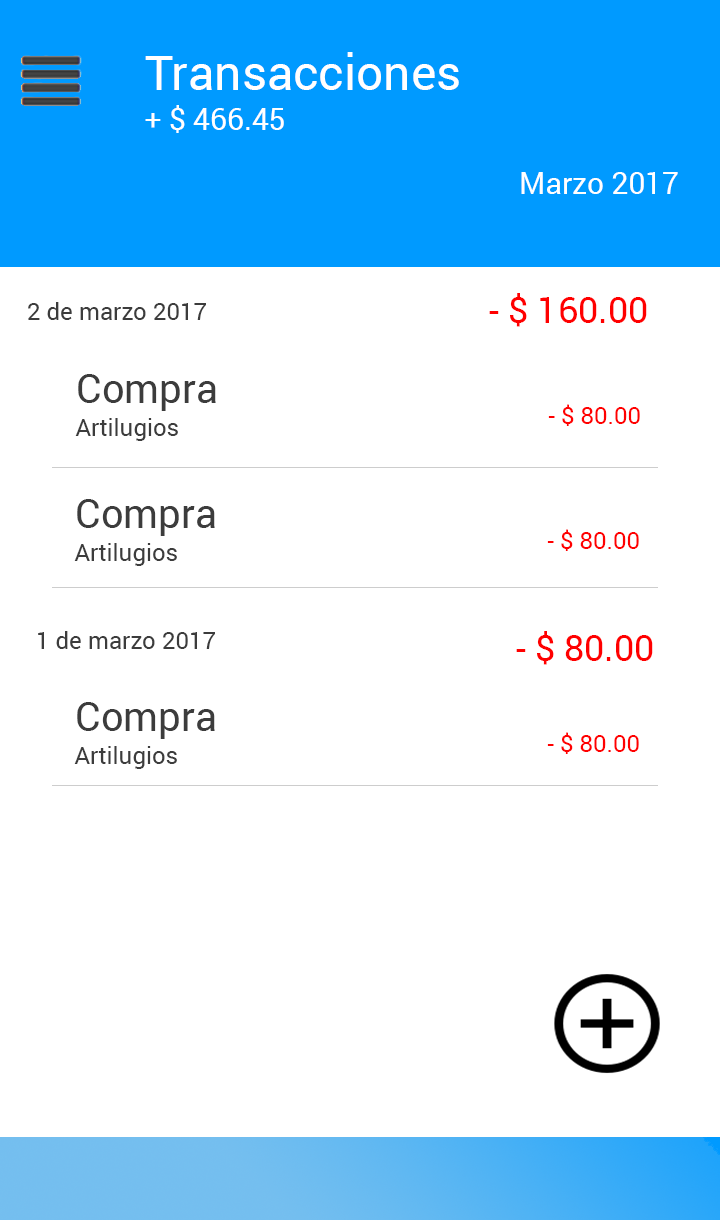
<style>
.page{position:relative;width:720px;height:1220px;background:#ffffff}
.page>*{position:absolute;margin:0}
.t1{font:48px "Roboto-Regular";color:#ffffff}
.t2{font:30px "Roboto-Regular";color:#ffffff}
.t3{font:36px "Roboto-Regular";color:#ff0000}
.t4{font:24px "Roboto-Regular";color:#3c3c3c}
.t5{font:40px "Roboto-Regular";color:#3c3c3c}
.t6{font:24px "Roboto-Regular";color:#ff0000}
</style>
<div class="page">
<p class="t1" style="left:145px;top:52px;width:314px;height:38px">Transacciones</p>
<p class="t2" style="left:145px;top:105px;width:139px;height:28px">+ $ 466.45</p>
<p class="t2" style="left:521px;top:172px;width:157px;height:22px">Marzo 2017</p>
<p class="t3" style="left:489px;top:293px;width:158px;height:34px">- $ 160.00</p>
<p class="t4" style="left:28px;top:302px;width:178px;height:18px">2 de marzo 2017</p>
<p class="t5" style="left:78px;top:374px;width:138px;height:37px">Compra</p>
<p class="t6" style="left:548px;top:404px;width:92px;height:22px">- $ 80.00</p>
<p class="t4" style="left:75px;top:418px;width:103px;height:23px">Artilugios</p>
<p class="t5" style="left:77px;top:499px;width:138px;height:37px">Compra</p>
<p class="t6" style="left:547px;top:529px;width:92px;height:22px">- $ 80.00</p>
<p class="t4" style="left:74px;top:543px;width:103px;height:23px">Artilugios</p>
<p class="t4" style="left:38px;top:631px;width:177px;height:18px">1 de marzo 2017</p>
<p class="t3" style="left:516px;top:631px;width:137px;height:34px">- $ 80.00</p>
<p class="t5" style="left:77px;top:702px;width:138px;height:37px">Compra</p>
<p class="t6" style="left:547px;top:732px;width:92px;height:22px">- $ 80.00</p>
<p class="t4" style="left:74px;top:746px;width:103px;height:23px">Artilugios</p>
</div>
